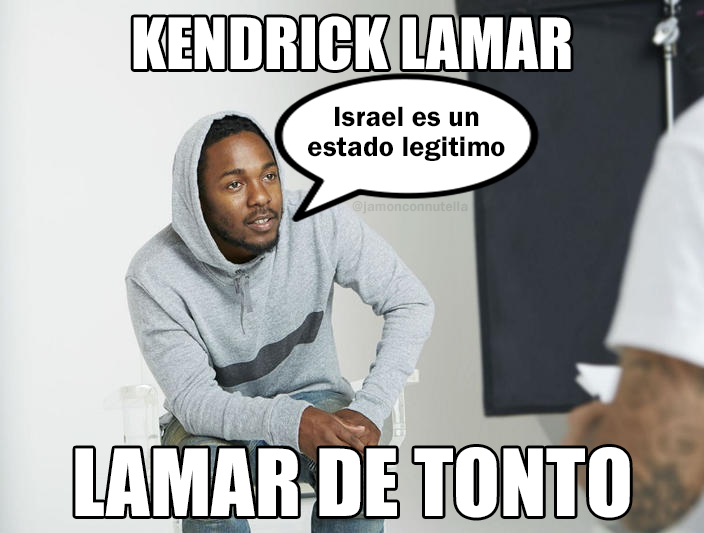
<style>
.page{position:relative;width:704px;height:533px}
.page>*{position:absolute;margin:0}
.t1{font:65px "Impact";color:#ffffff}
.t2{font:29px "FranklinGothic-Demi";color:#000000}
.t3{font:14.3px "FranklinGothic-Demi";color:#aeb2ac}
.t4{font:85.6px "Impact";color:#ffffff}
</style>
<div class="page">
<p class="t1" style="left:133px;top:16px;width:438px;height:54px">KENDRICK LAMAR</p>
<p class="t2" style="left:308px;top:106px;width:197px;height:55px;text-align:center">Israel es un<br>estado legitimo</p>
<p class="t3" style="left:352px;top:201px;width:116px;height:13px">@jamonconnutella</p>
<p class="t4" style="left:75px;top:447px;width:555px;height:71px">LAMAR DE TONTO</p>
</div>
